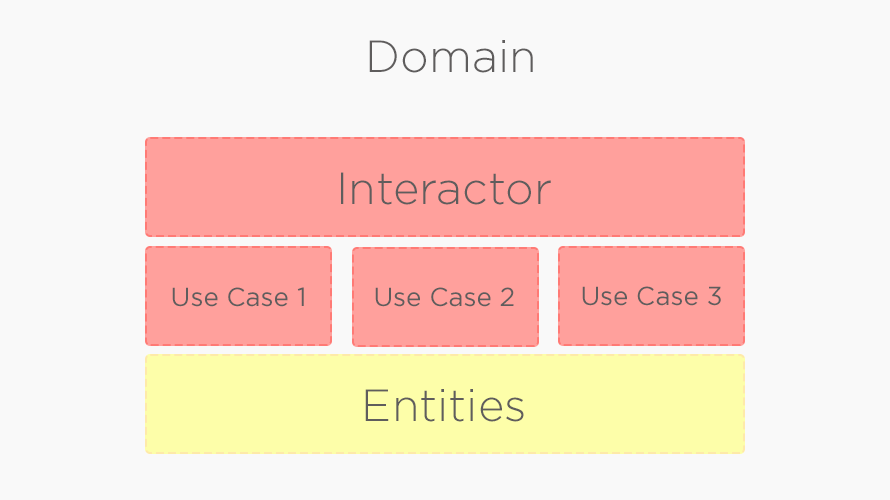
<style>
.page{position:relative;width:890px;height:500px;background:#f9f9f9}
.page>*{position:absolute;margin:0}
.t1{font:45px "GothamPro-Light";color:#5f5d5d}
.t2{font:26px "GothamPro";color:#5f5d5d}
</style>
<div class="page">
<p class="t1" style="left:369px;top:40px;width:164px;height:33px">Domain</p>
<p class="t1" style="left:341px;top:172px;width:210px;height:33px">Interactor</p>
<p class="t2" style="left:172px;top:287px;width:132px;height:20px">Use Case 1</p>
<p class="t2" style="left:375px;top:287px;width:139px;height:20px">Use Case 2</p>
<p class="t2" style="left:582px;top:286px;width:139px;height:20px">Use Case 3</p>
<p class="t1" style="left:365px;top:389px;width:159px;height:33px">Entities</p>
</div>
